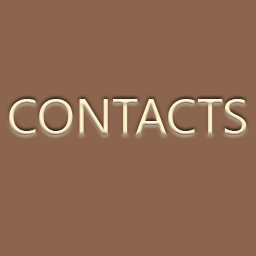
<style>
.page{position:relative;width:256px;height:256px;background:#8b654d}
.page>*{position:absolute;margin:0}
.t1{font:50px "SegoeUI";color:#fff2ca}
</style>
<div class="page">
<p class="t1" style="left:9px;top:99px;width:238px;height:36px">CONTACTS</p>
</div>
